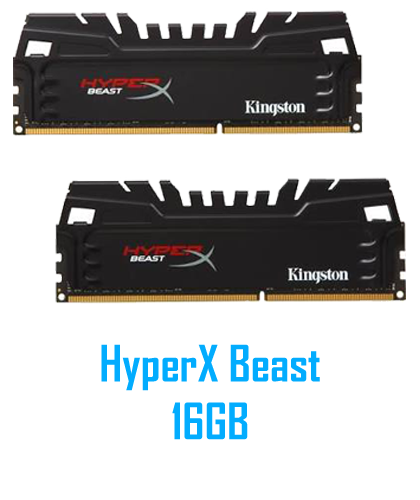
<style>
.page{position:relative;width:420px;height:500px;background:#ffffff}
.page>*{position:absolute;margin:0}
.t1{font:48px "AgencyFB-Bold";color:#02acfe}
</style>
<div class="page">
<p class="t1" style="left:101px;top:344px;width:219px;height:96px;text-align:center">HyperX Beast <br>16GB</p>
</div>
